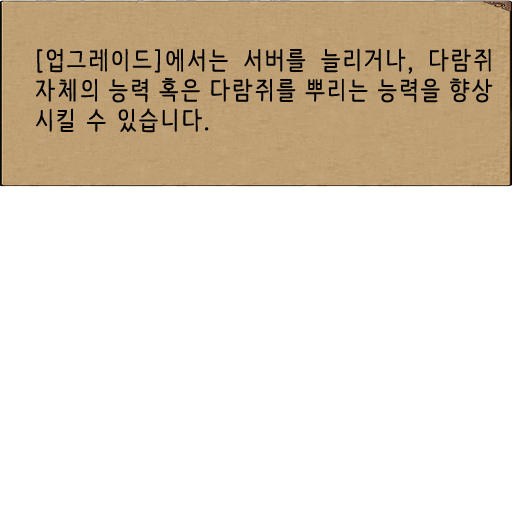
<style>
.page{position:relative;width:512px;height:512px;background:#ffffff}
.page>*{position:absolute;margin:0}
.t1{font:25px "NanumBarunpen";letter-spacing:0.075em;color:#000000;font-weight:bold}
</style>
<div class="page">
<p class="t1" style="left:36px;top:48px;width:457px;height:85px;text-align:justify">[업그레이드]에서는 서버를 늘리거나, 다람쥐 자체의 능력 혹은 다람쥐를 뿌리는 능력을 향상 시킬 수 있습니다.</p>
</div>
